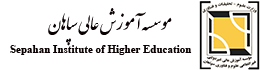
<style>
.page{position:relative;width:260px;height:70px;background:#ffffff}
.page>*{position:absolute;margin:0}
.t1{font:30px "IranNastaliq";color:#090001}
.t2{font:11px "TimesNewRomanPS-BoldMT";color:#090001}
</style>
<div class="page">
<p class="t1" style="left:48px;top:8px;width:124px;height:38px">موسسه آموزش عالی سپاهان</p>
<p class="t2" style="left:10px;top:45px;width:182px;height:10px">Sepahan Institute of Higher Education</p>
</div>
